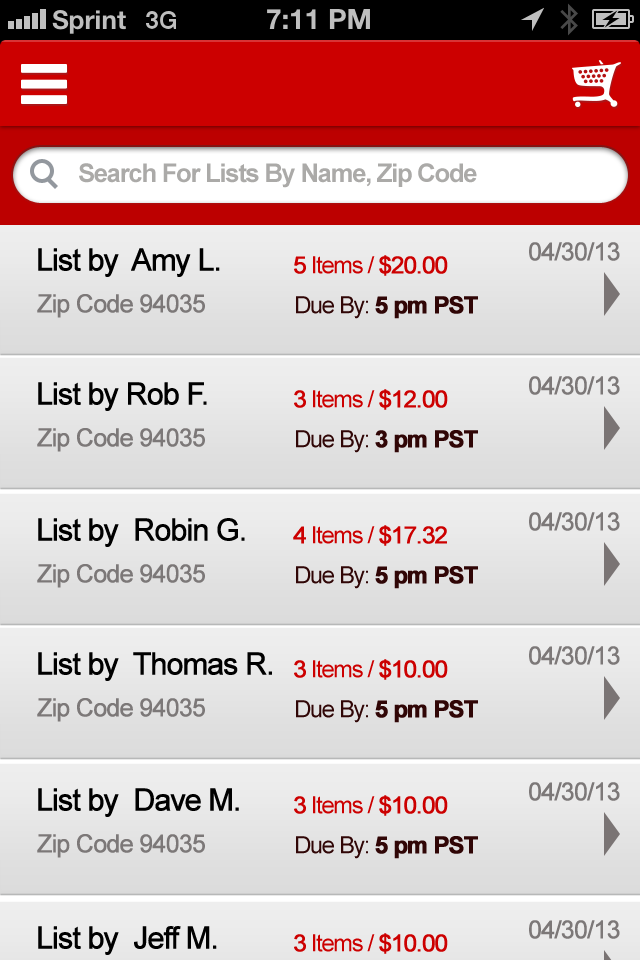
<style>
.page{position:relative;width:640px;height:960px}
.page>*{position:absolute;margin:0}
.t1{font:25.7px "Arial-BoldMT";letter-spacing:-0.05em;color:#abaaa8}
.t2{font:25px "ArialMT";letter-spacing:-0.055em;color:#7c7878;font-weight:bold}
.t3{font:30.4px "ArialMT";letter-spacing:-0.055em;color:#000000;font-weight:bold}
.t4{font:23.7px "ArialMT";letter-spacing:-0.055em;color:#cc0000}
.t5{font:23.7px "ArialMT";letter-spacing:-0.055em;color:#cc0000;font-weight:bold}
.t6{font:23.7px "Arial-BoldMT";letter-spacing:-0.055em;color:#300606;font-weight:bold}
.t7{font:23.7px "ArialMT";letter-spacing:-0.055em;color:#300606}
</style>
<div class="page">
<p class="t1" style="left:79px;top:163px;width:398px;height:25px">Search For Lists By Name, Zip Code</p>
<p class="t2" style="left:529px;top:242px;width:91px;height:19px">04/30/13</p>
<p class="t3" style="left:38px;top:248px;width:182px;height:29px">List by  Amy L.</p>
<p class="t4" style="left:294px;top:255px;width:154px;height:21px"><span class="t5">5</span> Items / <span class="t5">$20.00</span></p>
<p class="t2" style="left:37px;top:294px;width:168px;height:24px">Zip Code 94035</p>
<p class="t6" style="left:296px;top:296px;width:182px;height:23px"><span class="t7">Due By: </span>5 pm PST</p>
<p class="t2" style="left:529px;top:376px;width:91px;height:19px">04/30/13</p>
<p class="t3" style="left:38px;top:382px;width:169px;height:29px">List by Rob F.</p>
<p class="t4" style="left:294px;top:389px;width:154px;height:21px"><span class="t5">3</span> Items / <span class="t5">$12.00</span></p>
<p class="t2" style="left:37px;top:428px;width:168px;height:24px">Zip Code 94035</p>
<p class="t6" style="left:296px;top:430px;width:182px;height:23px"><span class="t7">Due By: </span>3 pm PST</p>
<p class="t3" style="left:38px;top:518px;width:207px;height:29px">List by  Robin G.</p>
<p class="t2" style="left:529px;top:512px;width:91px;height:19px">04/30/13</p>
<p class="t4" style="left:293px;top:525px;width:154px;height:21px"><span class="t5">4</span> Items / <span class="t5">$17.32</span></p>
<p class="t2" style="left:37px;top:564px;width:168px;height:24px">Zip Code 94035</p>
<p class="t6" style="left:296px;top:566px;width:182px;height:23px"><span class="t7">Due By: </span>5 pm PST</p>
<p class="t3" style="left:38px;top:652px;width:234px;height:29px">List by  Thomas R.</p>
<p class="t2" style="left:529px;top:646px;width:91px;height:19px">04/30/13</p>
<p class="t4" style="left:294px;top:659px;width:154px;height:21px"><span class="t5">3</span> Items / <span class="t5">$10.00</span></p>
<p class="t2" style="left:37px;top:698px;width:168px;height:24px">Zip Code 94035</p>
<p class="t6" style="left:296px;top:700px;width:182px;height:23px"><span class="t7">Due By: </span>5 pm PST</p>
<p class="t2" style="left:529px;top:782px;width:91px;height:19px">04/30/13</p>
<p class="t3" style="left:38px;top:788px;width:201px;height:29px">List by  Dave M.</p>
<p class="t4" style="left:294px;top:795px;width:154px;height:21px"><span class="t5">3</span> Items / <span class="t5">$10.00</span></p>
<p class="t2" style="left:37px;top:834px;width:168px;height:24px">Zip Code 94035</p>
<p class="t6" style="left:296px;top:836px;width:182px;height:23px"><span class="t7">Due By: </span>5 pm PST</p>
<p class="t3" style="left:38px;top:926px;width:179px;height:29px">List by  Jeff M.</p>
<p class="t2" style="left:529px;top:920px;width:91px;height:19px">04/30/13</p>
<p class="t4" style="left:294px;top:933px;width:154px;height:21px"><span class="t5">3</span> Items / <span class="t5">$10.00</span></p>
</div>
